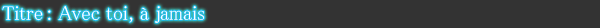
<style>
.page{position:relative;width:600px;height:28px;background:#333333}
.page>*{position:absolute;margin:0}
.t1{font:20px "MS-PMincho";color:#ffffff}
</style>
<div class="page">
<p class="t1" style="left:2px;top:6px;width:203px;height:17px">Titre : Avec toi, à jamais</p>
</div>
